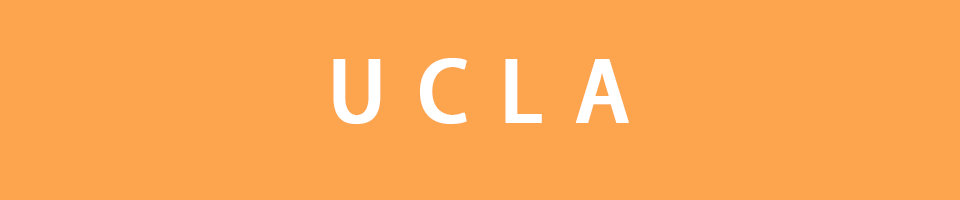
<style>
.page{position:relative;width:960px;height:200px;background:#fda54e}
.page>*{position:absolute;margin:0}
.t1{font:140.6px "AdobeHeitiStd-Regular";letter-spacing:0.36em;color:#ffffff;font-weight:bold}
</style>
<div class="page">
<p class="t1" style="left:333px;top:58px;width:296px;height:66px">UCLA</p>
</div>
